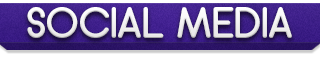
<style>
.page{position:relative;width:320px;height:58px}
.page>*{position:absolute;margin:0}
.t1{font:44px "Arciform";color:#ffffff}
</style>
<div class="page">
<p class="t1" style="left:27px;top:7px;width:265px;height:31px">SOCIAL MEDIA</p>
</div>
